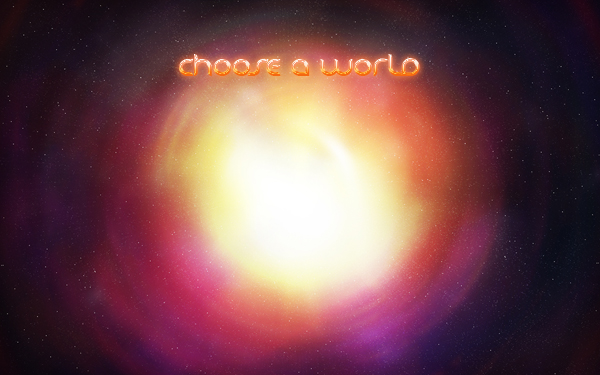
<style>
.page{position:relative;width:600px;height:375px}
.page>*{position:absolute;margin:0}
.t1{font:22px "Danube"}
</style>
<div class="page">
<p class="t1" style="left:179px;top:54px;width:241px;height:22px">choose a world</p>
</div>
